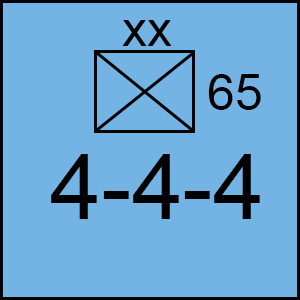
<style>
.page{position:relative;width:300px;height:300px;background:#74b4e4}
.page>*{position:absolute;margin:0}
.t1{font:50px "ArialMT";color:#000000}
.t2{font:91.7px "ArialMT";color:#000000}
</style>
<div class="page">
<p class="t1" style="left:122px;top:20px;width:50px;height:26px">xx</p>
<p class="t1" style="left:208px;top:74px;width:53px;height:36px">65</p>
<p class="t2" style="left:51px;top:154px;width:209px;height:65px">4-4-4</p>
</div>
